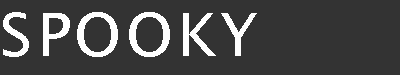
<style>
.page{position:relative;width:400px;height:75px;background:#333333}
.page>*{position:absolute;margin:0}
.t1{font:60px "LucidaSansUnicode";letter-spacing:0.075em;color:#ffffff}
</style>
<div class="page">
<p class="t1" style="left:3px;top:12px;width:254px;height:45px">SPOOKY</p>
</div>
